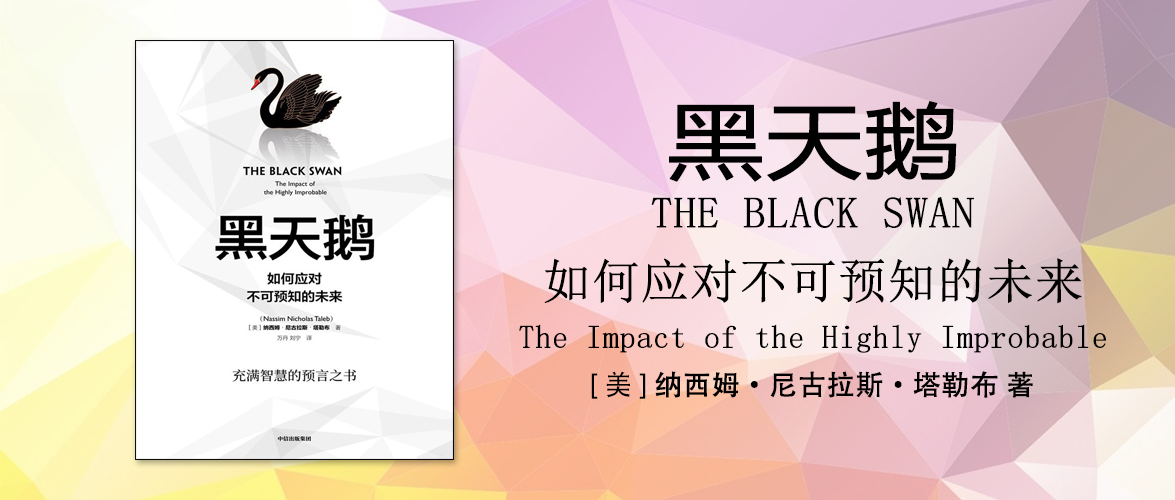
<style>
.page{position:relative;width:1175px;height:500px}
.page>*{position:absolute;margin:0}
.t1{font:82.5px "MicrosoftYaHei";color:#010101;font-weight:bold;scale:1.16 1}
.t2{font:44px "SimSun";color:#010101;font-weight:bold}
.t3{font:48px "SimSun";color:#000000;font-weight:bold}
.t4{font:32px "SimSun";color:#000000;font-weight:bold}
.t5{font:28px "AdobeHeitiStd-Regular";color:#000000;font-weight:bold}
.t6{font:28px "AdobeHeitiStd-Regular";color:#000000}
</style>
<div class="page">
<p class="t1" style="left:669px;top:101px;width:288px;height:81px">黑天鹅</p>
<p class="t2" style="left:651px;top:197px;width:323px;height:31px">THE BLACK SWAN</p>
<p class="t3" style="left:544px;top:258px;width:538px;height:46px">如何应对不可预知的未来</p>
<p class="t4" style="left:519px;top:324px;width:587px;height:29px">The Impact of the Highly Improbable</p>
<p class="t5" style="left:591px;top:371px;width:442px;height:28px"><span class="t6">[ 美 ] </span>纳西姆·尼古拉斯·塔勒布 著</p>
</div>
